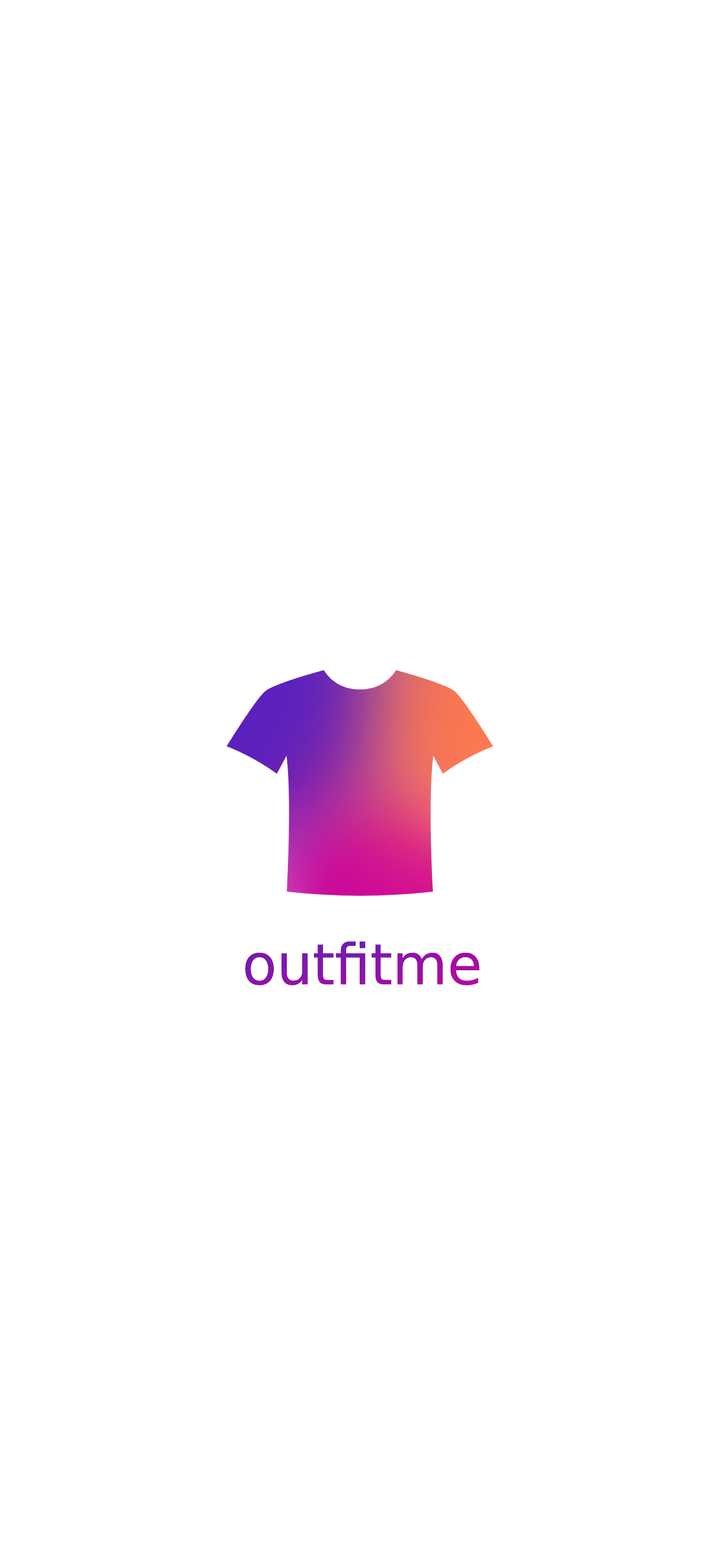
<style>
.page{position:relative;width:725px;height:1568px;background:#ffffff}
.page>*{position:absolute;margin:0}
.t1{font:56.4px "DejaVuSans";color:#9011ad}
</style>
<div class="page">
<p class="t1" style="left:245px;top:941px;width:234px;height:45px">outfitme</p>
</div>
